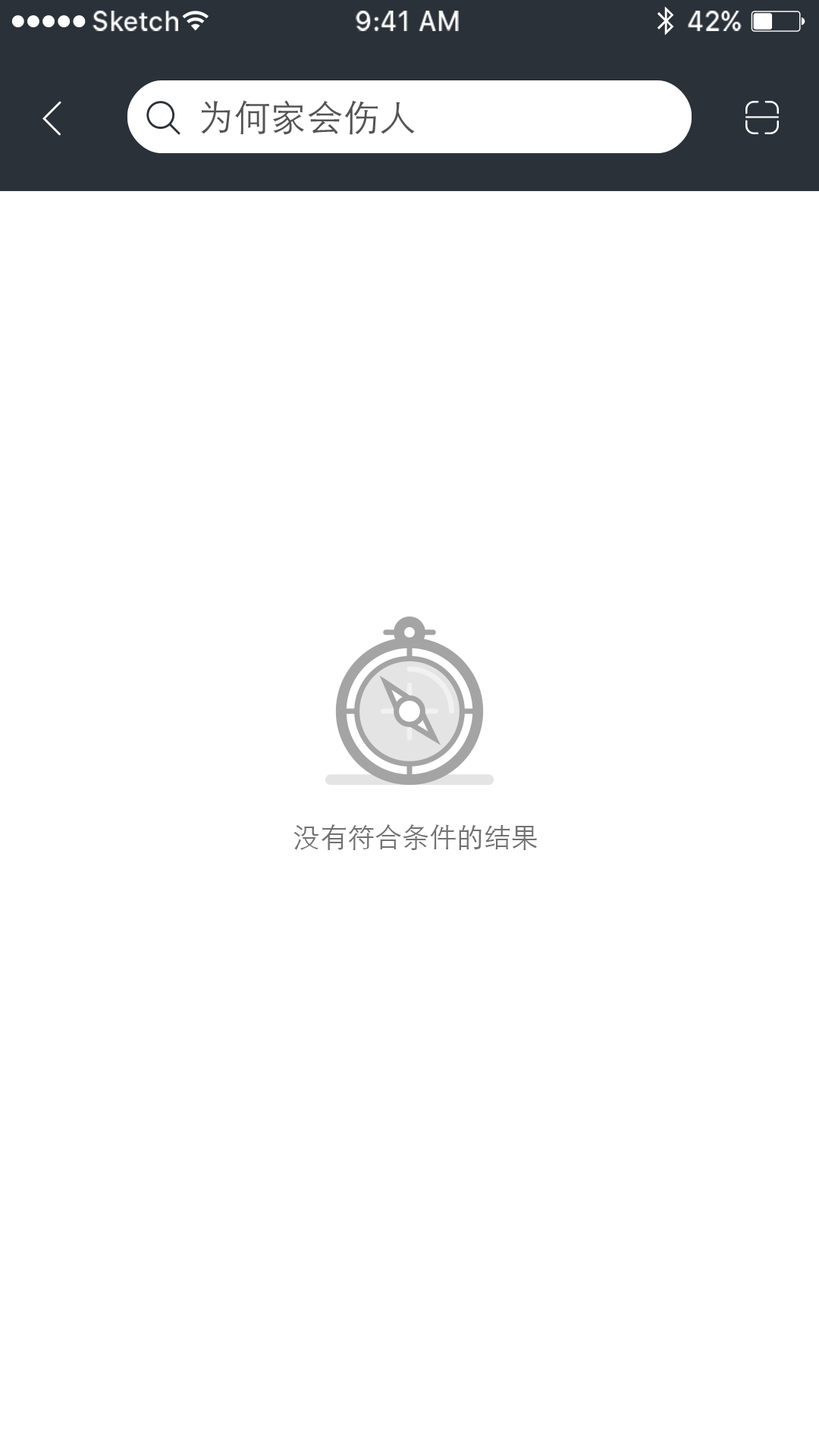
<style>
.page{position:relative;width:819px;height:1456px;background:#ffffff}
.page>*{position:absolute;margin:0}
.t1{font:26.2px "SFUIText-Medium";color:#ffffff}
.t2{font:36.4px "STHeitiSC-Light";color:#545454}
.t3{font:27.3px "STHeitiSC-Light";color:#717171}
</style>
<div class="page">
<p class="t1" style="left:93px;top:11px;width:85px;height:20px">Sketch</p>
<p class="t1" style="left:356px;top:11px;width:103px;height:20px">9:41 AM</p>
<p class="t1" style="left:688px;top:11px;width:54px;height:20px">42%</p>
<p class="t2" style="left:201px;top:100px;width:214px;height:35px">为何家会伤人</p>
<p class="t3" style="left:293px;top:824px;width:245px;height:26px">没有符合条件的结果</p>
</div>
